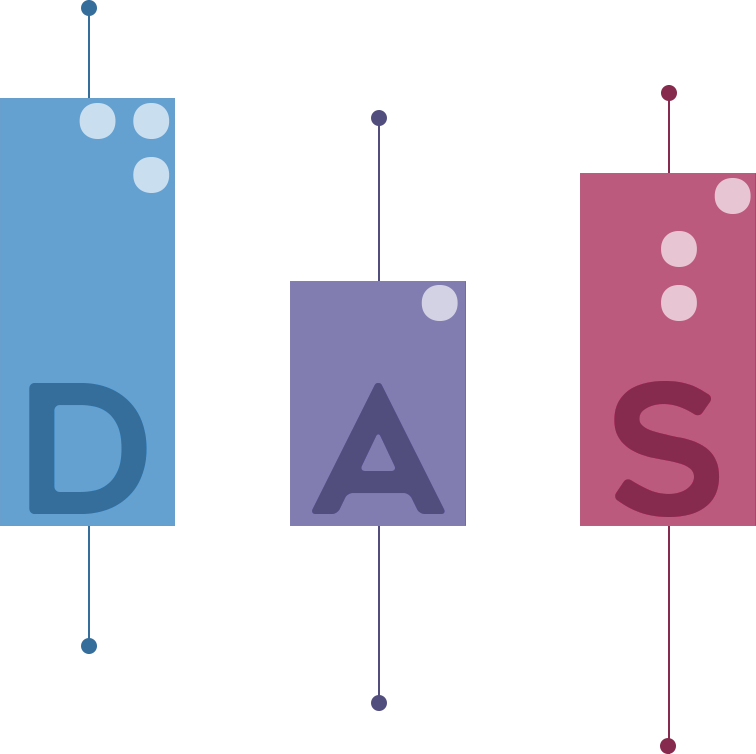
<style>
.page{position:relative;width:756px;height:754px;background:#ffffff}
.page>*{position:absolute;margin:0}
.t1{font:179.5px "BrailleNormal";color:#c9deef}
.t2{font:179.5px "BrailleNormal";color:#e7c5d2}
.t3{font:179.5px "BrailleNormal";color:#d3d2e4}
.t4{font:179.5px "GeometosRounded";color:#356d9b}
.t5{font:179.5px "GeometosRounded";color:#514d7d}
.t6{font:179.5px "GeometosRounded";color:#862b4d}
</style>
<div class="page">
<p class="t1" style="left:79px;top:103px;width:91px;height:90px">D</p>
<p class="t2" style="left:661px;top:178px;width:90px;height:143px">S</p>
<p class="t3" style="left:421px;top:285px;width:37px;height:36px">a</p>
<p class="t4" style="left:29px;top:383px;width:118px;height:131px">D</p>
<p class="t5" style="left:312px;top:382px;width:133px;height:132px">A</p>
<p class="t6" style="left:614px;top:381px;width:106px;height:136px">S</p>
</div>
